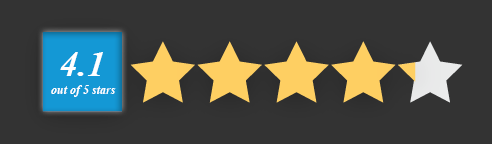
<style>
.page{position:relative;width:492px;height:144px;background:#333333}
.page>*{position:absolute;margin:0}
.t1{font:36px "TimesNewRomanPS-BoldItalicMT";color:#ffffff}
.t2{font:12px "TimesNewRomanPS-BoldItalicMT";color:#ffffff}
</style>
<div class="page">
<p class="t1" style="left:60px;top:52px;width:43px;height:24px">4.1</p>
<p class="t2" style="left:51px;top:85px;width:65px;height:12px">out of 5 stars</p>
</div>
